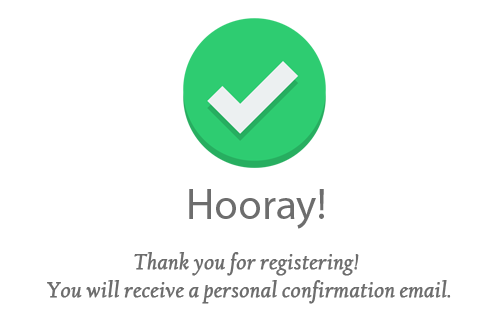
<style>
.page{position:relative;width:500px;height:327px;background:#ffffff}
.page>*{position:absolute;margin:0}
.t1{font:43.3px "MyriadPro-Regular";color:#6d6d6d}
.t2{font:23.3px "CalifornianFB-Italic";color:#6d6d6d;font-weight:bold}
</style>
<div class="page">
<p class="t1" style="left:189px;top:189px;width:135px;height:40px">Hooray!</p>
<p class="t2" style="left:47px;top:252px;width:404px;height:52px;text-align:center">Thank you for registering! <br>You will receive a personal confirmation email.</p>
</div>
